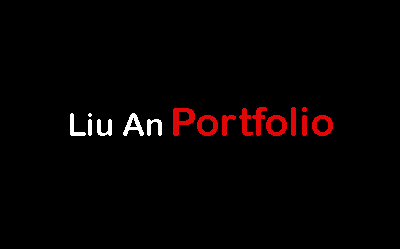
<style>
.page{position:relative;width:400px;height:249px;background:#000000}
.page>*{position:absolute;margin:0}
.t1{font:40px "ArialRoundedMTBold";color:#df0707}
.t2{font:32px "ArialRoundedMTBold";color:#ffffff}
</style>
<div class="page">
<p class="t1" style="left:70px;top:107px;width:263px;height:29px"><span class="t2">Liu An </span>Portfolio</p>
</div>
